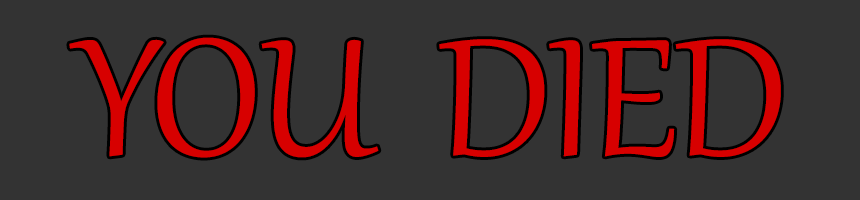
<style>
.page{position:relative;width:860px;height:200px;background:#333333}
.page>*{position:absolute;margin:0}
.t1{font:203.6px "Gabriola";letter-spacing:-0.015em;color:#d70000}
</style>
<div class="page">
<p class="t1" style="left:69px;top:37px;width:712px;height:121px">YOU  DIED</p>
</div>
